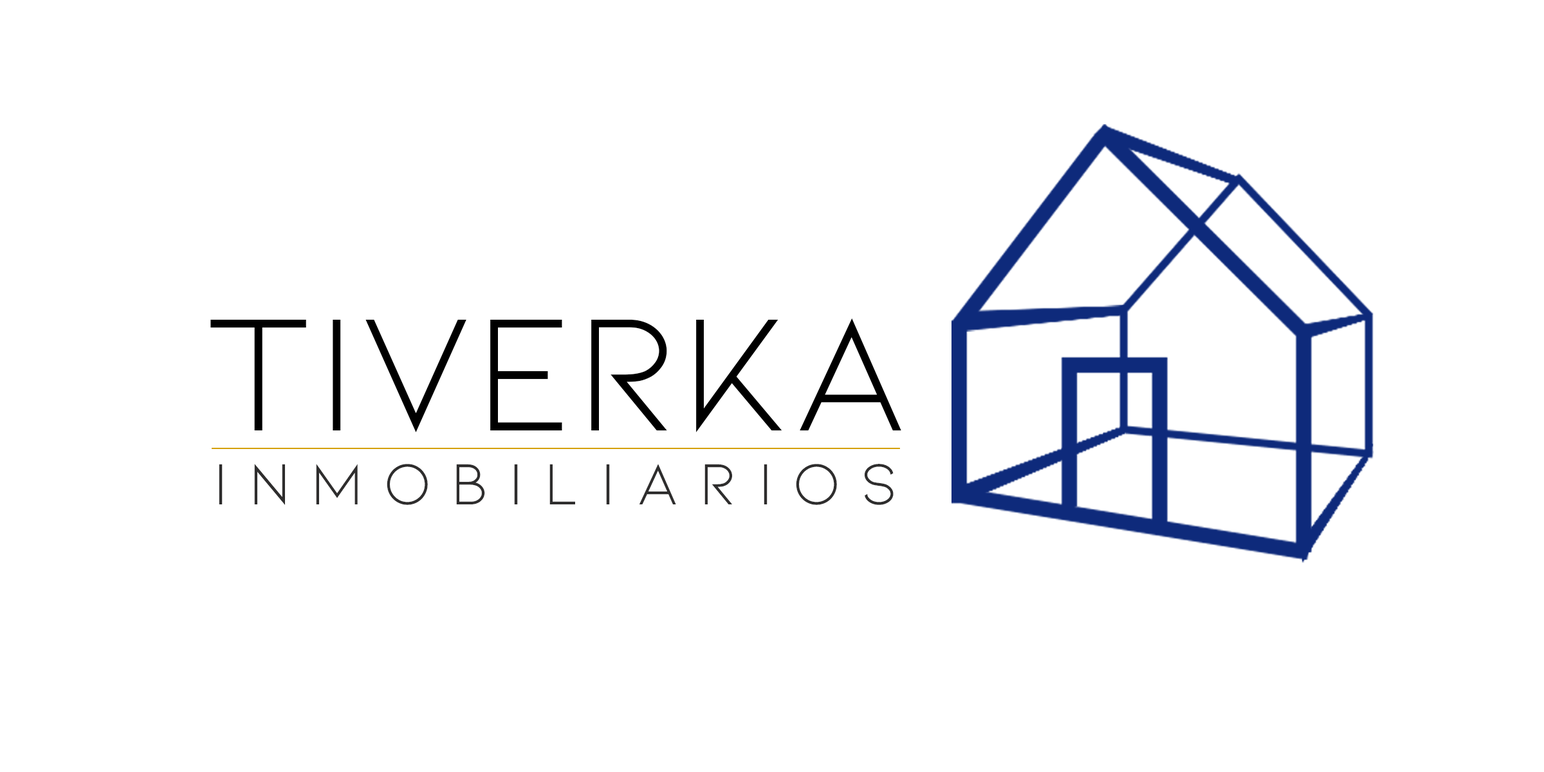
<style>
.page{position:relative;width:1544px;height:772px;background:#ffffff}
.page>*{position:absolute;margin:0}
.t1{font:61.5px "Kiona-Regular";color:#2e2d2d}
.t2{font:170.3px "Kiona-Regular";color:#000000}
</style>
<div class="page">
<p class="t1" style="left:210px;top:318px;width:691px;height:187px;text-align:center"><span class="t2">tiverka<br></span>I N M O B I L I A R I O S</p>
</div>
